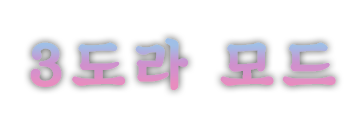
<style>
.page{position:relative;width:360px;height:120px;background:#ffffff}
.page>*{position:absolute;margin:0}
.t1{font:58px "SDKukdetopokki-aLt";letter-spacing:0.12em;font-weight:bold}
</style>
<div class="page">
<p class="t1" style="left:30px;top:38px;width:306px;height:53px">3도라 모드</p>
</div>
